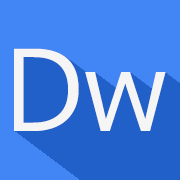
<style>
.page{position:relative;width:180px;height:180px;background:#4285f4}
.page>*{position:absolute;margin:0}
.t1{font:108px "NanumBarunGothic";color:#f5f5f5}
</style>
<div class="page">
<p class="t1" style="left:14px;top:48px;width:152px;height:83px">Dw</p>
</div>
